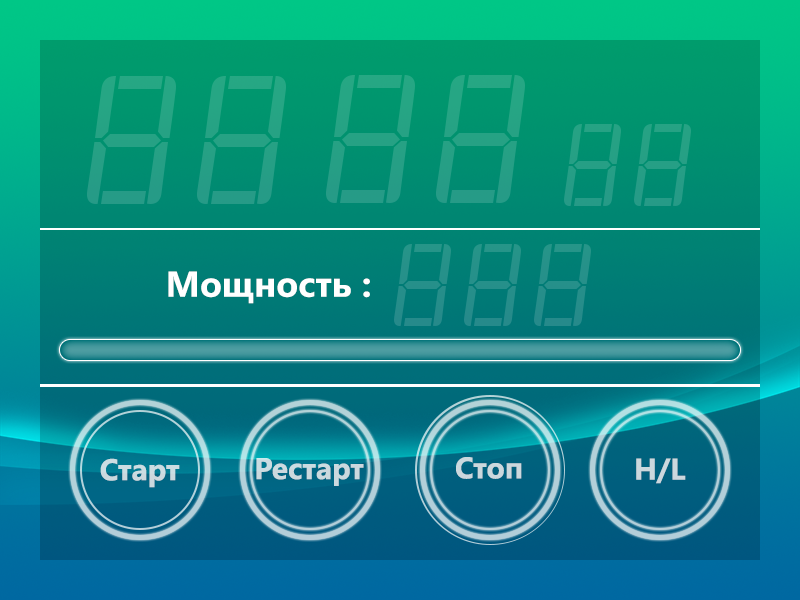
<style>
.page{position:relative;width:800px;height:600px}
.page>*{position:absolute;margin:0}
.t1{font:35.9px "SegoeUI-Bold";color:#ffffff}
.t2{font:30px "SegoeUI-Bold";color:#cbdde2}
.t3{font:30px "SegoeUI-Bold";color:#cbd9de}
.t4{font:30px "SegoeUI-Bold";color:#cbd8de}
.t5{font:30px "SegoeUI-Bold";color:#cbd8dd}
</style>
<div class="page">
<p class="t1" style="left:168px;top:271px;width:202px;height:33px">Мощность :</p>
<p class="t2" style="left:100px;top:458px;width:80px;height:30px">Старт</p>
<p class="t3" style="left:256px;top:458px;width:108px;height:28px">Рестарт</p>
<p class="t4" style="left:456px;top:457px;width:66px;height:22px">Стоп</p>
<p class="t5" style="left:636px;top:458px;width:50px;height:26px">H/L</p>
</div>
